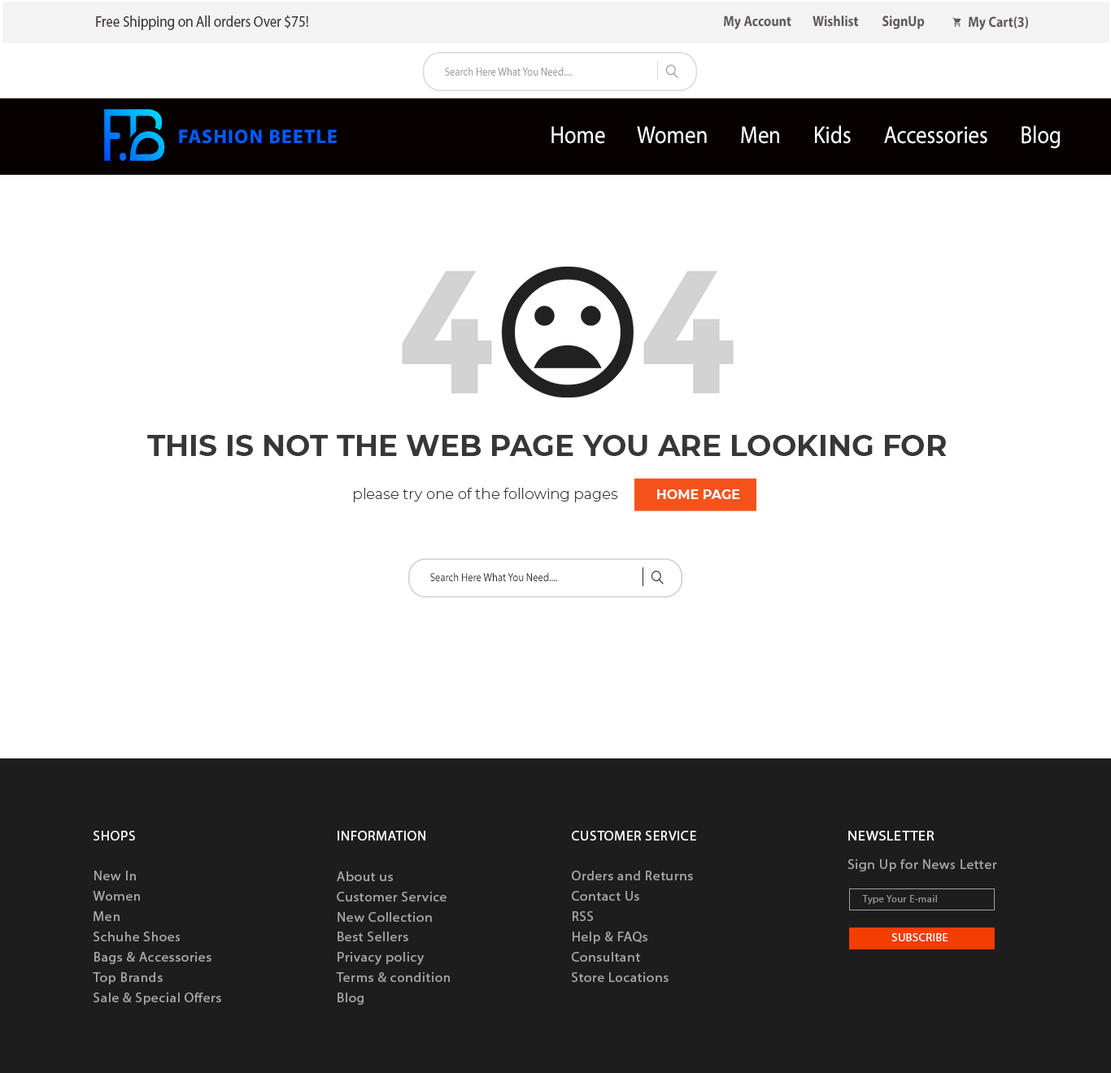
<style>
.page{position:relative;width:1111px;height:1073px;background:#ffffff}
.page>*{position:absolute;margin:0}
.t1{font:15.5px "MyriadPro-Regular";color:#44393b;scale:0.89 1}
.t2{font:14.6px "MyriadPro-Bold";color:#61585a;scale:0.89 1}
.t3{font:11.6px "MyriadPro-Regular";color:#938e8e;scale:0.89 1}
.t4{font:24.4px "MyriadPro-Regular";color:#ffffff;scale:0.89 1}
.t5{font:24.4px "MyriadPro-Regular";color:#e77ae0;scale:0.89 1}
.t6{font:19.5px "MyriadPro-Bold";letter-spacing:0.05em;color:#005bff}
.t7{font:29.3px "Montserrat-Bold";color:#373737}
.t8{font:14.6px "Montserrat-Light";color:#373737}
.t9{font:13px "Montserrat-Bold";color:#ffffff}
.t10{font:11.6px "MyriadPro-Regular";color:#282424;scale:0.89 1}
.t11{font:13.6px/20.2px "MyriadPro-Regular";letter-spacing:0.04em;color:#a8a8a8}
.t12{font:13.6px/20.2px "MyriadPro-Regular";letter-spacing:0.04em;color:#ffffff}
.t13{font:13.6px/20.2px "MyriadPro-Regular";letter-spacing:0.04em;color:#a8a6a6}
.t14{font:13.6px/28.5px "MyriadPro-Regular";letter-spacing:0.04em;color:#a8a6a6}
.t15{font:14.2px/28.5px "MyriadPro-Regular";letter-spacing:0.04em;color:#ffffff}
.t16{font:9.7px "MyriadPro-Regular";letter-spacing:0.04em;color:#a8a6a6}
.t17{font:11.2px "MyriadPro-Regular";letter-spacing:0.04em;color:#ffffff}
</style>
<div class="page">
<p class="t1" style="left:96px;top:15px;width:212px;height:15px">Free Shipping on All orders Over $75!</p>
<p class="t2" style="left:724px;top:15px;width:67px;height:14px">My Account</p>
<p class="t2" style="left:812px;top:15px;width:46px;height:12px">Wishlist</p>
<p class="t2" style="left:882px;top:15px;width:43px;height:14px">SignUp</p>
<p class="t2" style="left:969px;top:16px;width:59px;height:14px">My Cart(3)</p>
<p class="t3" style="left:445px;top:67px;width:127px;height:9px">Search Here What You Need....</p>
<p class="t4" style="left:551px;top:125px;width:509px;height:24px"><span class="t5">  </span>Home       Women       Men       Kids       Accessories       Blog</p>
<p class="t6" style="left:179px;top:129px;width:158px;height:15px">FASHION BEETLE</p>
<p class="t7" style="left:147px;top:435px;width:800px;height:21px">THIS IS NOT THE WEB PAGE YOU ARE LOOKING FOR</p>
<p class="t8" style="left:354px;top:488px;width:264px;height:15px">please try one of the following pages</p>
<p class="t9" style="left:657px;top:490px;width:83px;height:9px;opacity:0.96">HOME PAGE</p>
<p class="t10" style="left:430px;top:573px;width:127px;height:8px">Search Here What You Need....</p>
<p class="t11" style="left:93px;top:831px;width:128px;height:174px"><span class="t12">SHOPS<br></span><br>New In<br>Women<br>Men<br>Schuhe Shoes<br>Bags &amp; Accessories<br>Top Brands<br>Sale &amp; Special Offers</p>
<p class="t13" style="left:336px;top:831px;width:114px;height:174px"><span class="t12">INFORMATION<br></span><br>About us<br>Customer Service<br>New Collection<br>Best Sellers<br>Privacy policy<br>Terms &amp; condition<br>Blog</p>
<p class="t13" style="left:572px;top:831px;width:124px;height:151px"><span class="t12">CUSTOMER SERVICE<br></span><br>Orders and Returns<br>Contact Us<br>RSS<br>Help &amp; FAQs<br>Consultant<br>Store Locations</p>
<p class="t14" style="left:847px;top:831px;width:150px;height:41px"><span class="t15">NEWSLETTER<br></span>Sign Up for News Letter</p>
<p class="t16" style="left:862px;top:895px;width:75px;height:10px;opacity:0.79">Type Your E-mail</p>
<p class="t17" style="left:891px;top:934px;width:57px;height:8px">SUBSCRIBE</p>
</div>
